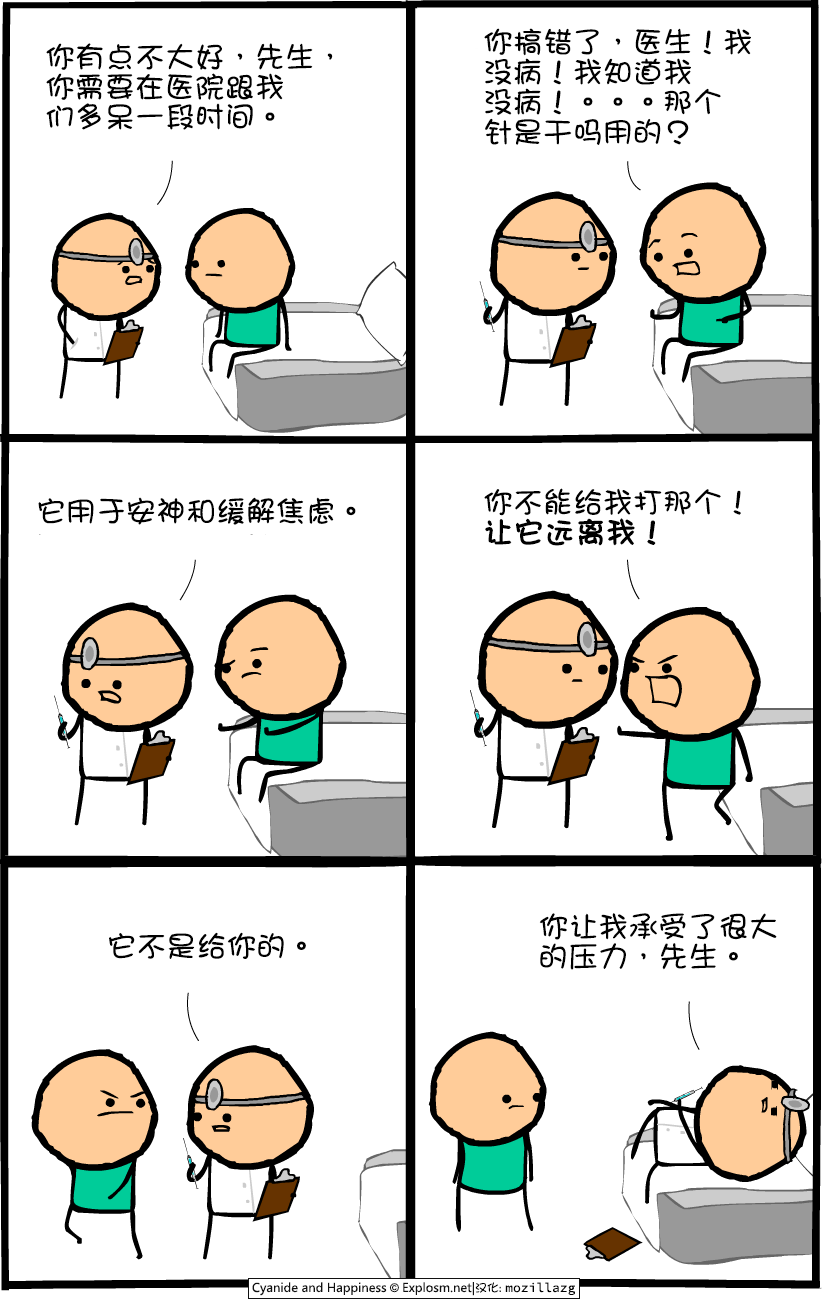
<style>
.page{position:relative;width:825px;height:1300px;background:#ffffff}
.page>*{position:absolute;margin:0}
.t1{font:30px/30px "DFGirl";color:#000000}
.t2{font:30px "DFGirl";color:#000000}
.t3{font:30px/30px "DFGirl";color:#000000;font-weight:bold}
</style>
<div class="page">
<p class="t1" style="left:484px;top:28px;width:267px;height:117px">你搞错了，医生！我<br>没病！我知道我<br>没病！。。。那个<br>针是干吗用的？</p>
<p class="t1" style="left:46px;top:43px;width:287px;height:87px">你有点不大好，先生，<br>你需要在医院跟我<br>们多呆一段时间。</p>
<p class="t2" style="left:38px;top:497px;width:318px;height:28px">它用于安神和缓解焦虑。</p>
<p class="t1" style="left:484px;top:488px;width:257px;height:58px">你不能给我打那个！<br><span class="t3">让它远离我！</span></p>
<p class="t1" style="left:539px;top:913px;width:238px;height:57px">你让我承受了很大<br>的压力，先生。</p>
<p class="t2" style="left:109px;top:932px;width:197px;height:27px">它不是给你的。</p>
</div>
